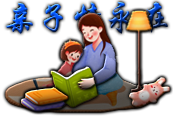
<style>
.page{position:relative;width:174px;height:140px;background:#ffffff}
.page>*{position:absolute;margin:0}
.t1{font:34.1px "STXingkai"}
</style>
<div class="page">
<p class="t1" style="left:6px;top:2px;width:162px;height:33px">亲子情永在</p>
</div>
